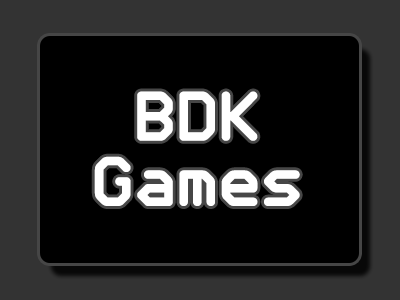
<style>
.page{position:relative;width:400px;height:300px;background:#000000}
.page>*{position:absolute;margin:0}
.t1{font:54.4px "UHF";color:#ffffff;font-weight:bold}
</style>
<div class="page">
<p class="t1" style="left:94px;top:91px;width:206px;height:115px;text-align:center">BDK<br>Games</p>
</div>
